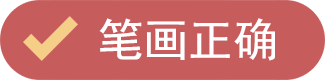
<style>
.page{position:relative;width:325px;height:80px;background:#c75c5c}
.page>*{position:absolute;margin:0}
.t1{font:45px "SimHei";color:#ffffff}
</style>
<div class="page">
<p class="t1" style="left:99px;top:18px;width:176px;height:43px">笔画正确</p>
</div>
